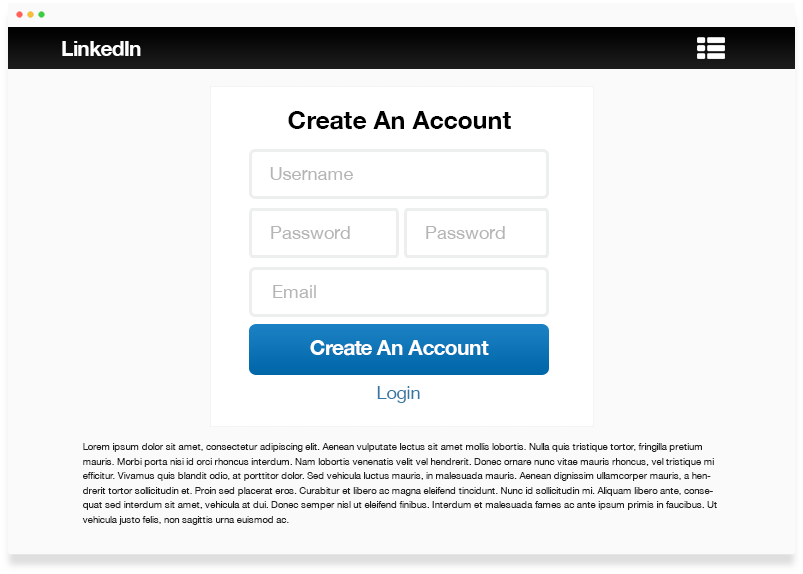
<style>
.page{position:relative;width:803px;height:574px;background:#fafafa}
.page>*{position:absolute;margin:0}
.t1{font:21.3px "HelveticaNeue-Bold";letter-spacing:-0.04em;color:#ffffff}
.t2{font:25.3px "HelveticaNeue-Bold";color:#000000}
.t3{font:18.3px "HelveticaNeue";color:#b5b5b5}
.t4{font:18.3px "HelveticaNeue";color:#3378a4}
.t5{font:9.6px/14.5px "HelveticaNeue";color:#1f1f1f}
</style>
<div class="page">
<p class="t1" style="left:62px;top:41px;width:79px;height:15px">LinkedIn</p>
<p class="t2" style="left:288px;top:111px;width:223px;height:19px">Create An Account</p>
<p class="t3" style="left:270px;top:167px;width:83px;height:13px">Username</p>
<p class="t3" style="left:271px;top:226px;width:79px;height:13px">Password</p>
<p class="t3" style="left:426px;top:226px;width:79px;height:13px">Password</p>
<p class="t3" style="left:273px;top:285px;width:43px;height:13px">Email</p>
<p class="t1" style="left:310px;top:340px;width:179px;height:16px">Create An Account</p>
<p class="t4" style="left:377px;top:386px;width:43px;height:17px">Login</p>
<p class="t5" style="left:82px;top:443px;width:635px;height:82px">Lorem ipsum dolor sit amet, consectetur adipiscing elit. Aenean vulputate lectus sit amet mollis lobortis. Nulla quis tristique tortor, fringilla pretium mauris. Morbi porta nisi id orci rhoncus interdum. Nam lobortis venenatis velit vel hendrerit. Donec ornare nunc vitae mauris rhoncus, vel tristique mi efficitur. Vivamus quis blandit odio, at porttitor dolor. Sed vehicula luctus mauris, in malesuada mauris. Aenean dignissim ullamcorper mauris, a hendrerit tortor sollicitudin et. Proin sed placerat eros. Curabitur et libero ac magna eleifend tincidunt. Nunc id sollicitudin mi. Aliquam libero ante, consequat sed interdum sit amet, vehicula at dui. Donec semper nisl ut eleifend finibus. Interdum et malesuada fames ac ante ipsum primis in faucibus. Ut vehicula justo felis, non sagittis urna euismod ac.</p>
</div>
